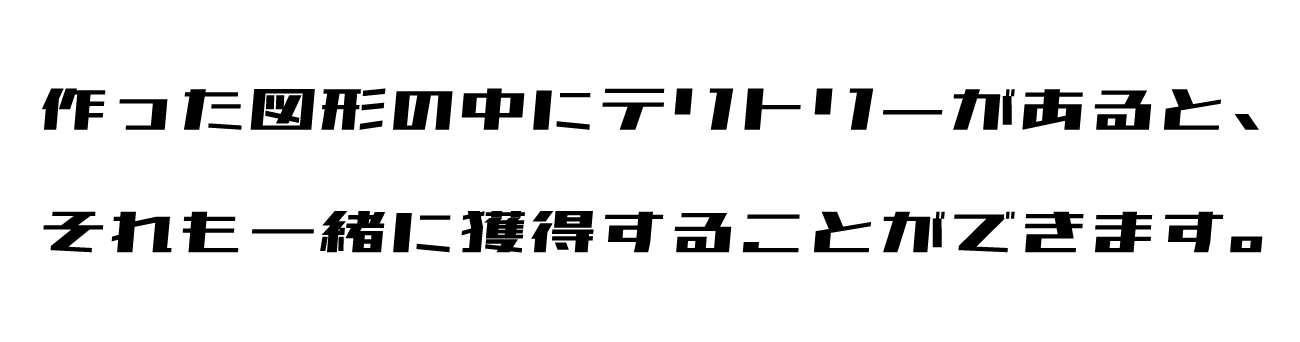
<style>
.page{position:relative;width:1300px;height:342px;background:#ffffff}
.page>*{position:absolute;margin:0}
.t1{font:70px "851Gkktt";color:#000000}
</style>
<div class="page">
<p class="t1" style="left:41px;top:88px;width:1222px;height:165px;text-align:center">作った図形の中にテリトリーがあると、<br>それも一緒に獲得することができます。</p>
</div>
